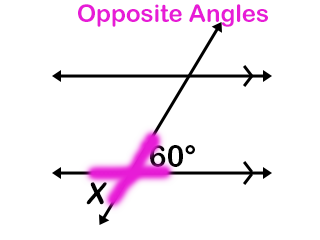
<style>
.page{position:relative;width:320px;height:240px;background:#ffffff}
.page>*{position:absolute;margin:0}
.t1{font:24px "ArialRoundedMTBold";color:#e81cd7}
.t2{font:30px "ArialRoundedMTBold";color:#000000}
.t3{font:30px "ArialRoundedMTBold";color:#000000;font-style:italic}
</style>
<div class="page">
<p class="t1" style="left:78px;top:4px;width:190px;height:23px">Opposite Angles</p>
<p class="t2" style="left:150px;top:145px;width:45px;height:22px">60°</p>
<p class="t3" style="left:86px;top:182px;width:21px;height:23px">X</p>
</div>
